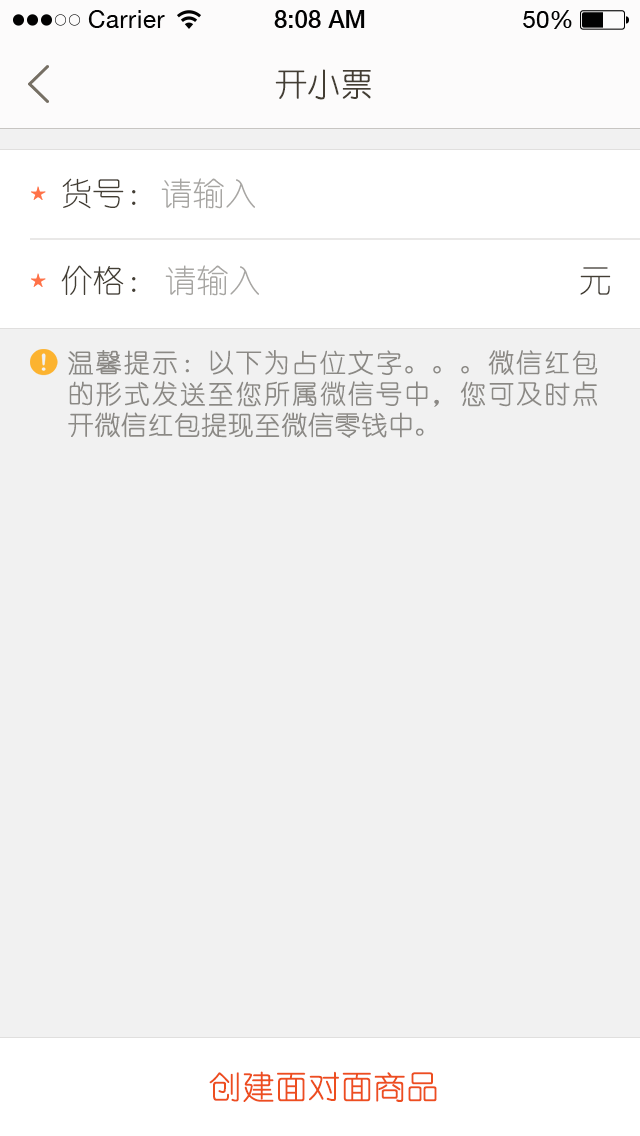
<style>
.page{position:relative;width:640px;height:1136px;background:#f1f1f1}
.page>*{position:absolute;margin:0}
.t1{font:32px "YouYuan";color:#433d33;text-transform:uppercase;font-weight:bold}
.t2{font:32px "YouYuan";color:#433e34;text-transform:uppercase}
.t3{font:32px "YouYuan";color:#a7a6a3;text-transform:uppercase}
.t4{font:26px "YouYuan";color:#8b8985;text-transform:uppercase;font-weight:bold}
.t5{font:32px "YouYuan";color:#ed4e1f;text-transform:uppercase;font-weight:bold}
</style>
<div class="page">
<p class="t1" style="left:275px;top:69px;width:96px;height:31px">开小票</p>
<p class="t2" style="left:62px;top:178px;width:74px;height:31px">货号：</p>
<p class="t3" style="left:161px;top:178px;width:94px;height:31px">请输入</p>
<p class="t2" style="left:61px;top:265px;width:75px;height:30px">价格：</p>
<p class="t3" style="left:165px;top:265px;width:94px;height:31px">请输入</p>
<p class="t2" style="left:580px;top:267px;width:31px;height:28px">元</p>
<p class="t4" style="left:68px;top:350px;width:530px;height:88px;text-align:justify">温馨提示：以下为占位文字。。。微信红包的形式发送至您所属微信号中，您可及时点开微信红包提现至微信零钱中。</p>
<p class="t5" style="left:209px;top:1071px;width:228px;height:31px">创建面对面商品</p>
</div>
